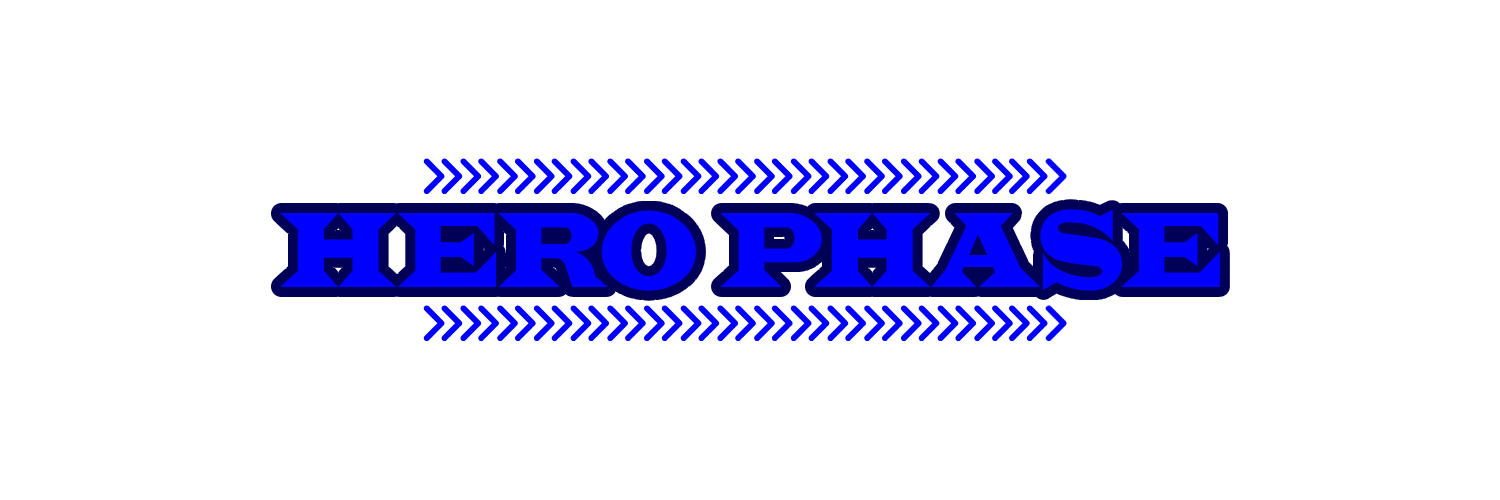
<style>
.page{position:relative;width:1500px;height:500px;background:#ffffff}
.page>*{position:absolute;margin:0}
.t1{font:111px "Indubitably";color:#0000ff}
</style>
<div class="page">
<p class="t1" style="left:280px;top:209px;width:940px;height:82px">HERO PHASE</p>
</div>
